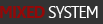
<style>
.page{position:relative;width:103px;height:24px;background:#333333}
.page>*{position:absolute;margin:0}
.t1{font:17.4px "Leelawadee";letter-spacing:-0.051em;color:#ffffff;scale:0.91 1}
.t2{font:17.4px "Leelawadee-Bold";letter-spacing:-0.051em;color:#950707;scale:0.91 1}
</style>
<div class="page">
<p class="t1" style="left:0px;top:6px;width:98px;height:12px"><span class="t2">MIXED </span>SYSTEM</p>
</div>
